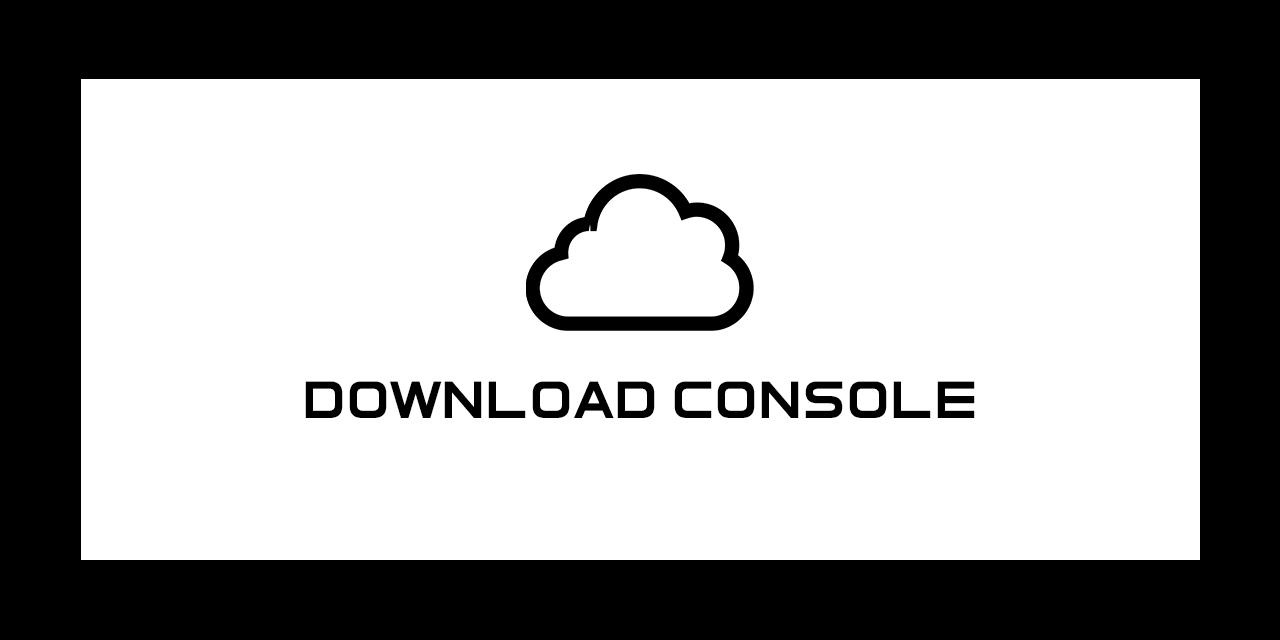
<style>
.page{position:relative;width:1280px;height:640px;background:#ffffff}
.page>*{position:absolute;margin:0}
.t1{font:50px "ElementalEnd";color:#000000}
</style>
<div class="page">
<p class="t1" style="left:305px;top:381px;width:670px;height:37px">download console</p>
</div>
